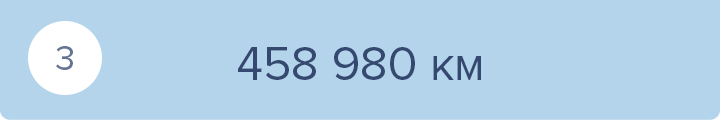
<style>
.page{position:relative;width:720px;height:120px;background:#b4d4eb}
.page>*{position:absolute;margin:0}
.t1{font:36px "ProximaNova-Regular";color:#647493}
.t2{font:48px "ProximaNova-Regular";color:#344870}
</style>
<div class="page">
<p class="t1" style="left:56px;top:46px;width:17px;height:24px">3</p>
<p class="t2" style="left:238px;top:47px;width:243px;height:33px">458 980 км</p>
</div>
